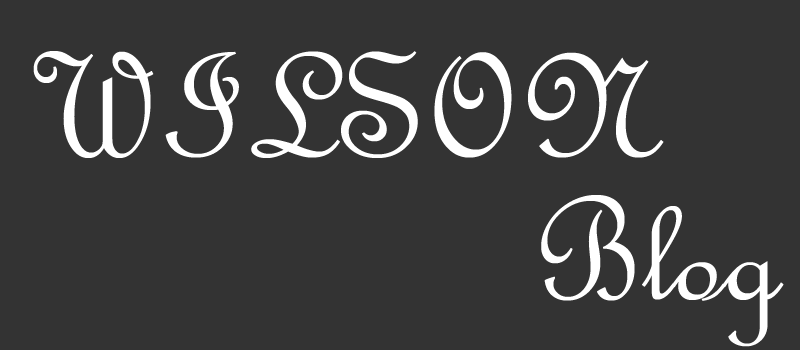
<style>
.page{position:relative;width:800px;height:350px;background:#333333}
.page>*{position:absolute;margin:0}
.t1{font:160px "FrenchScriptMT";color:#ffffff}
</style>
<div class="page">
<p class="t1" style="left:33px;top:51px;width:631px;height:107px">WILSON</p>
<p class="t1" style="left:541px;top:195px;width:243px;height:152px">Blog</p>
</div>
